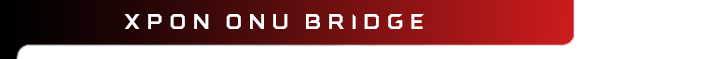
<style>
.page{position:relative;width:706px;height:59px;background:#ffffff}
.page>*{position:absolute;margin:0}
.t1{font:24px "AMDRTG";letter-spacing:-0.05em;color:#ffffff}
</style>
<div class="page">
<p class="t1" style="left:124px;top:14px;width:300px;height:15px">xpon onu bridge</p>
</div>
